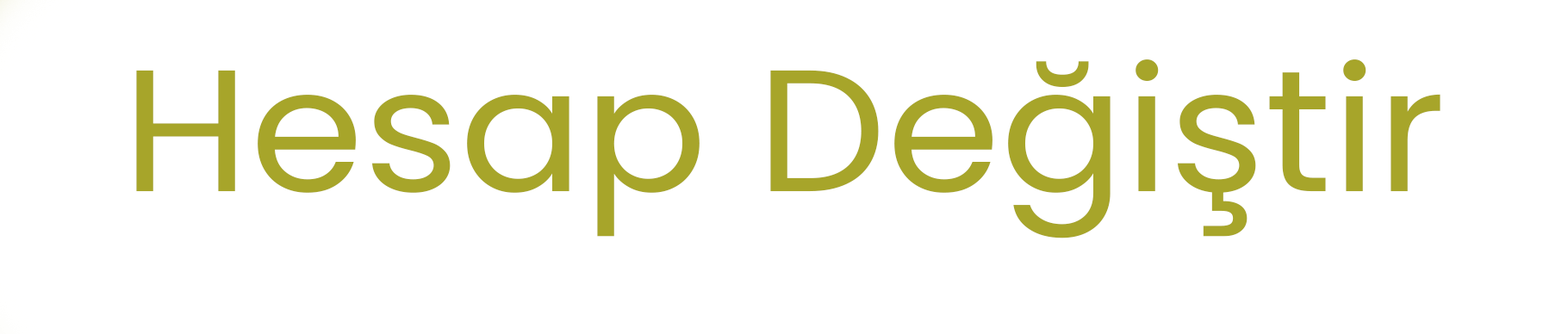
<style>
.page{position:relative;width:1568px;height:334px;background:#ffffff}
.page>*{position:absolute;margin:0}
.t1{font:173.1px "Poppins-Regular";color:#a7a52a;scale:1.06 1}
</style>
<div class="page">
<p class="t1" style="left:136px;top:59px;width:1304px;height:180px">Hesap Değiştir</p>
</div>
